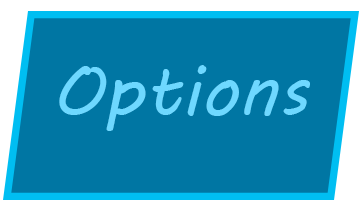
<style>
.page{position:relative;width:360px;height:216px;background:#0076a3}
.page>*{position:absolute;margin:0}
.t1{font:72px "MVBoli";color:#6ed9ff}
</style>
<div class="page">
<p class="t1" style="left:59px;top:65px;width:251px;height:66px">Options</p>
</div>
